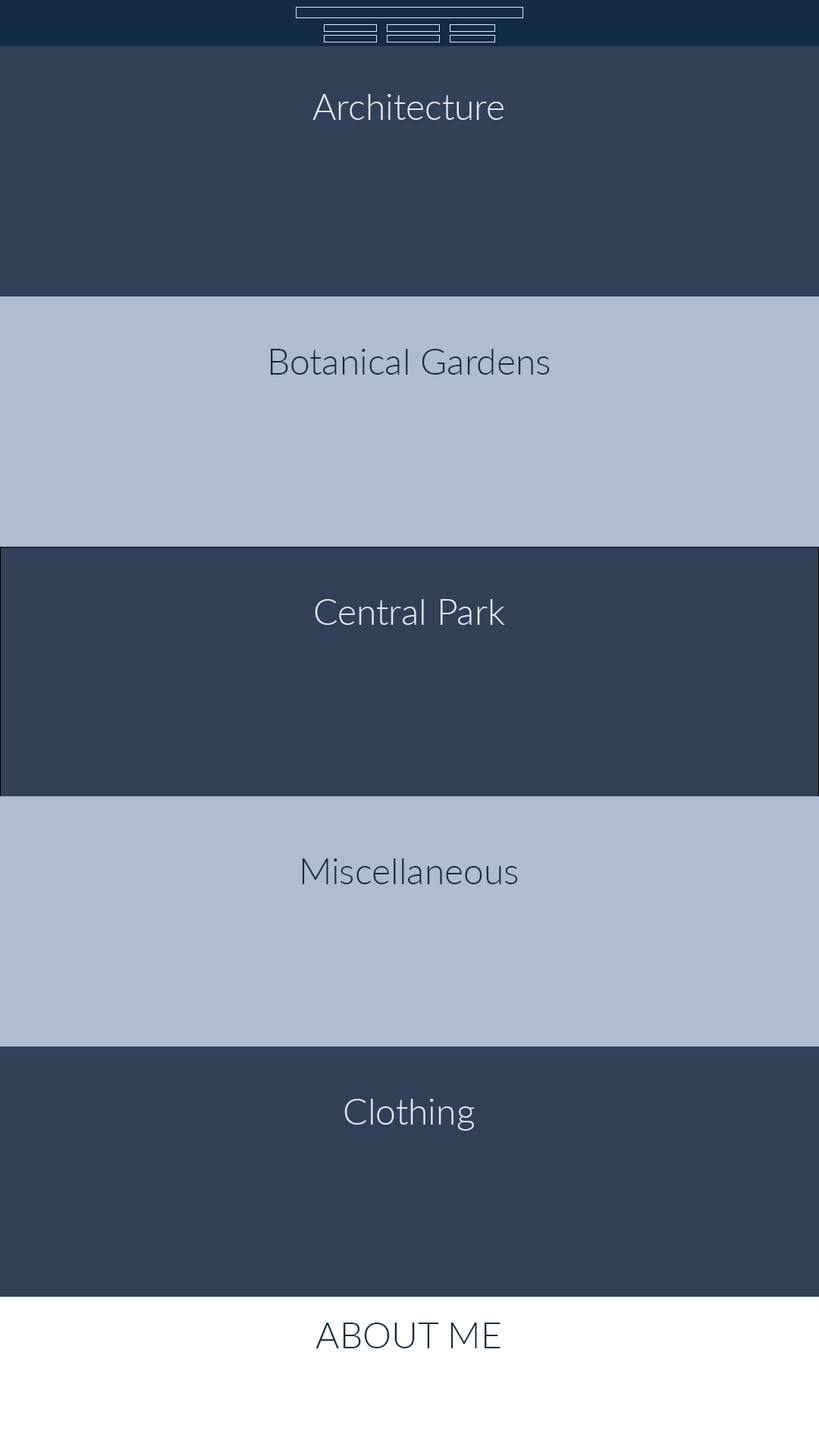
<style>
.page{position:relative;width:819px;height:1456px;background:#314158}
.page>*{position:absolute;margin:0}
.t1{font:36.4px "Lato-Light";color:#e3e7f0}
.t2{font:36.4px "Lato-Light";color:#132b43}
</style>
<div class="page">
<p class="t1" style="left:312px;top:94px;width:192px;height:26px">Architecture</p>
<p class="t2" style="left:271px;top:349px;width:279px;height:26px">Botanical Gardens</p>
<p class="t1" style="left:315px;top:599px;width:190px;height:26px">Central Park</p>
<p class="t2" style="left:303px;top:858px;width:215px;height:26px">Miscellaneous</p>
<p class="t1" style="left:344px;top:1099px;width:131px;height:32px">Clothing</p>
<p class="t2" style="left:315px;top:1323px;width:185px;height:25px">ABOUT ME</p>
</div>
